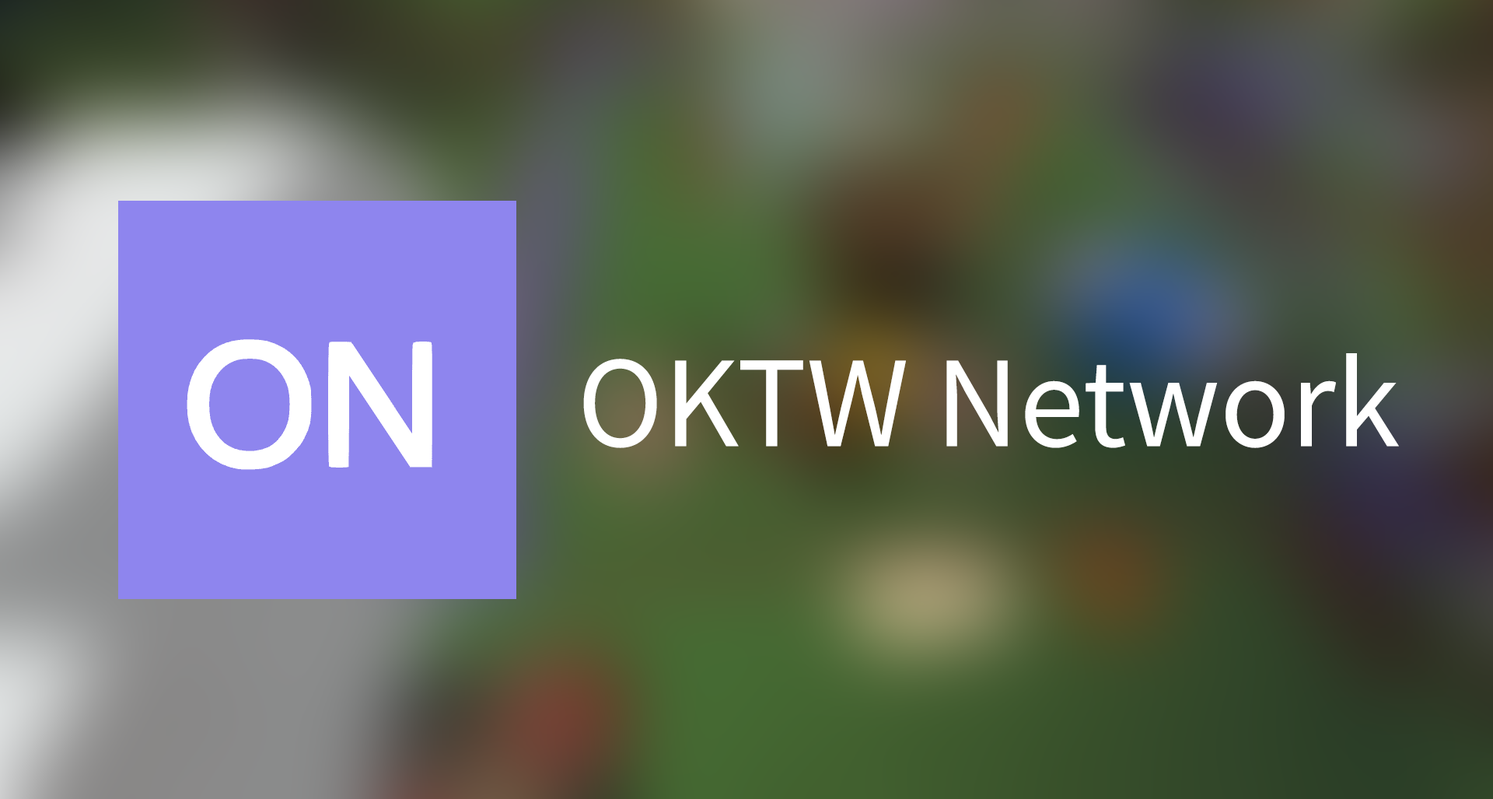
<style>
.page{position:relative;width:1493px;height:799px}
.page>*{position:absolute;margin:0}
.t1{font:116.6px "NotoSansCJKtc-Regular";color:#ffffff}
</style>
<div class="page">
<p class="t1" style="left:583px;top:353px;width:816px;height:95px">OKTW Network</p>
</div>
